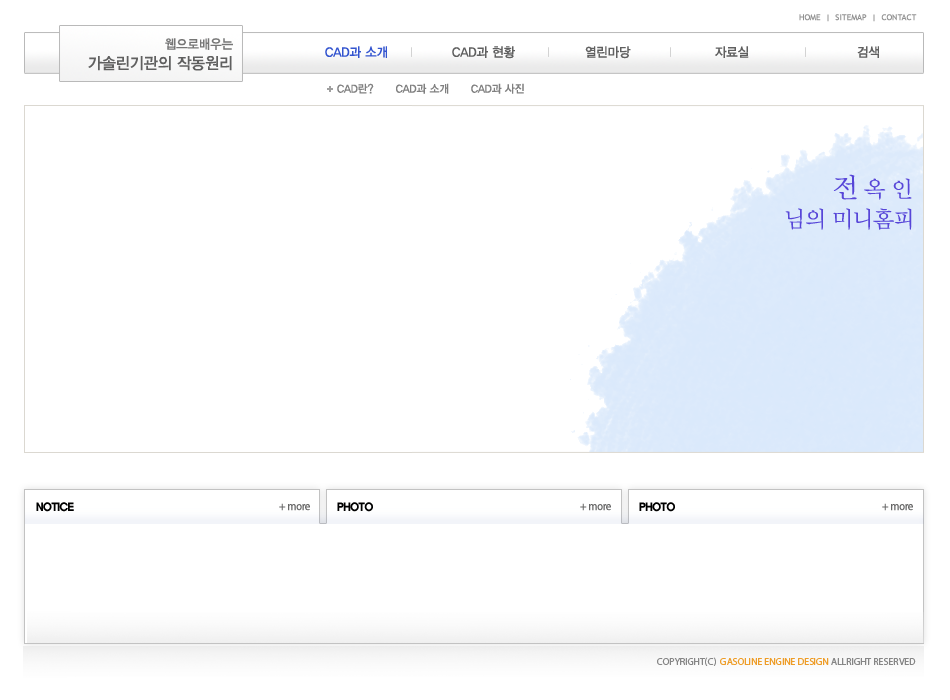
<style>
.page{position:relative;width:950px;height:700px;background:#ffffff}
.page>*{position:absolute;margin:0}
.t1{font:8px "TrebuchetMS";color:#929292;text-transform:uppercase;font-weight:bold}
.t2{font:16px/20px "YDIYGO130";color:#606060;scale:0.95 1}
.t3{font:13px/20px "YDIYGO130";color:#767676;scale:0.95 1}
.t4{font:13px "YDIYGO130";color:#3455cf;text-transform:uppercase;scale:0.95 1}
.t5{font:13px "YDIYGO130";color:#606060;text-transform:uppercase;scale:0.95 1}
.t6{font:11px "YDIYGO130";color:#808080;text-transform:uppercase;scale:0.95 1}
.t7{font:23px "YDIYMjO330";letter-spacing:-0.05em;color:#5746d8;text-transform:uppercase}
.t8{font:28px "YDIYMjO330";letter-spacing:-0.05em;color:#5746d8;text-transform:uppercase}
.t9{font:11px "ExpoB-HM";letter-spacing:-0.05em;color:#000000;text-transform:uppercase;scale:0.9 1}
.t10{font:12px "MyriadPro-Regular";letter-spacing:-0.05em;color:#666666;font-weight:bold;scale:0.9 1}
.t11{font:10px "MyriadPro-Regular";letter-spacing:-0.01em;color:#ee9d28;text-transform:uppercase}
.t12{font:10px "MyriadPro-Regular";letter-spacing:-0.01em;color:#868686;text-transform:uppercase}
</style>
<div class="page">
<p class="t1" style="left:799px;top:14px;width:118px;height:8px">home  |  sitemap  |  contact</p>
<p class="t2" style="left:88px;top:38px;width:145px;height:33px;text-align:right"><span class="t3">웹으로배우는<br></span>가솔린기관의 작동원리</p>
<p class="t4" style="left:325px;top:46px;width:62px;height:12px">CAD과 소개</p>
<p class="t5" style="left:452px;top:46px;width:63px;height:13px">CAD과 현황</p>
<p class="t5" style="left:585px;top:46px;width:46px;height:13px">열린마당</p>
<p class="t5" style="left:715px;top:46px;width:34px;height:12px">자료실</p>
<p class="t5" style="left:857px;top:46px;width:22px;height:12px">검색</p>
<p class="t6" style="left:337px;top:83px;width:187px;height:11px">CAD란?      CAD과 소개      CAD과 사진</p>
<p class="t7" style="left:833px;top:174px;width:79px;height:26px"><span class="t8">전</span> 옥 인</p>
<p class="t7" style="left:785px;top:208px;width:127px;height:22px">님의 미니홈피</p>
<p class="t9" style="left:36px;top:502px;width:38px;height:10px">notice</p>
<p class="t10" style="left:279px;top:503px;width:31px;height:8px">+ more</p>
<p class="t9" style="left:337px;top:502px;width:36px;height:10px">photo</p>
<p class="t10" style="left:580px;top:503px;width:31px;height:8px">+ more</p>
<p class="t9" style="left:639px;top:502px;width:36px;height:10px">photo</p>
<p class="t10" style="left:882px;top:503px;width:31px;height:8px">+ more</p>
<p class="t11" style="left:657px;top:657px;width:259px;height:9px"><span class="t12">copyright(c)  </span>gasoline engine design<span class="t12"> allright reserved</span></p>
</div>
